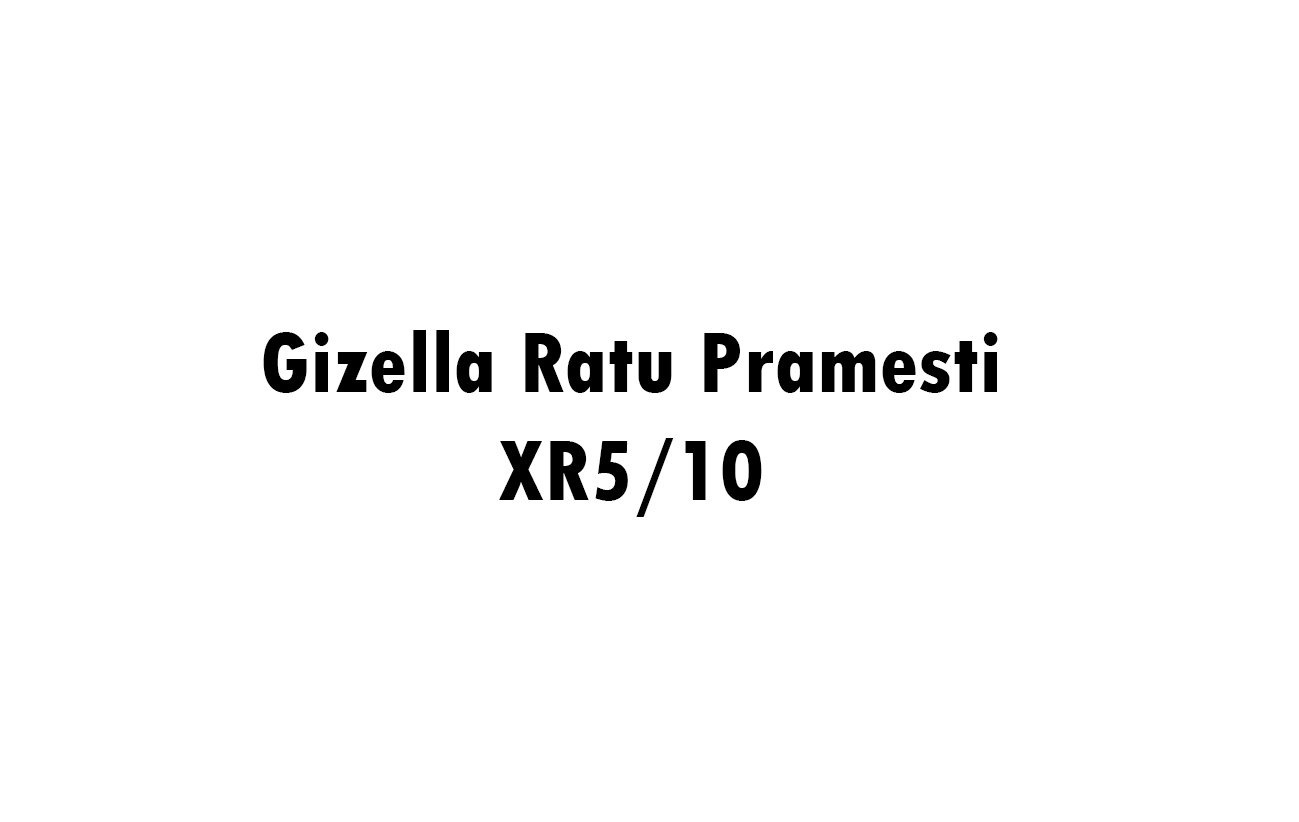
<style>
.page{position:relative;width:1299px;height:822px;background:#ffffff}
.page>*{position:absolute;margin:0}
.t1{font:90px "TwCenMT-CondensedExtraBold";color:#000000}
</style>
<div class="page">
<p class="t1" style="left:263px;top:330px;width:735px;height:187px;text-align:center">Gizella Ratu Pramesti<br>XR5/10</p>
</div>
